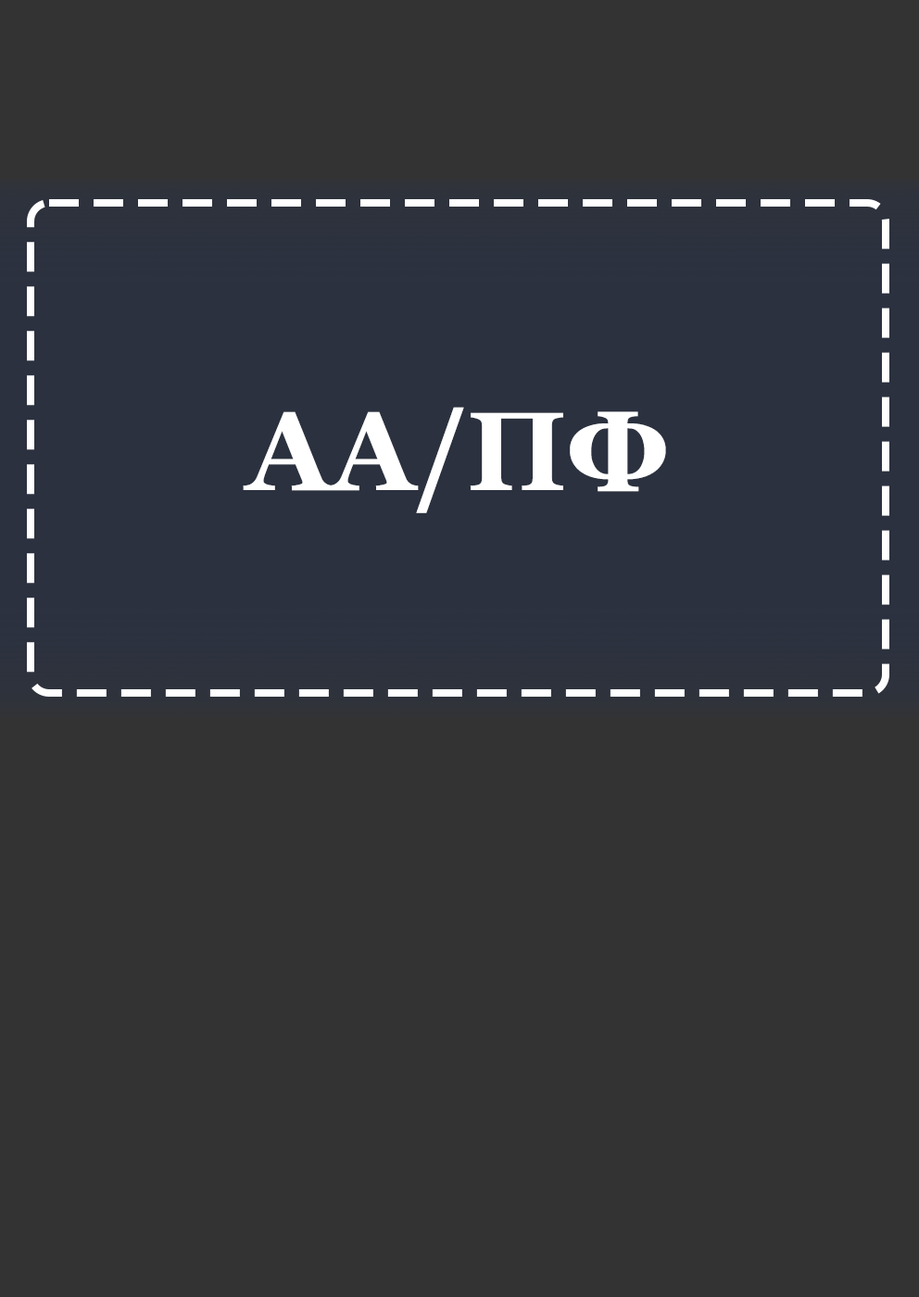
<style>
.page{position:relative;width:919px;height:1297px;background:#333333}
.page>*{position:absolute;margin:0}
.t1{font:111.2px "Georgia-Bold";color:#ffffff}
</style>
<div class="page">
<p class="t1" style="left:243px;top:407px;width:423px;height:106px">АА/ПФ</p>
</div>
